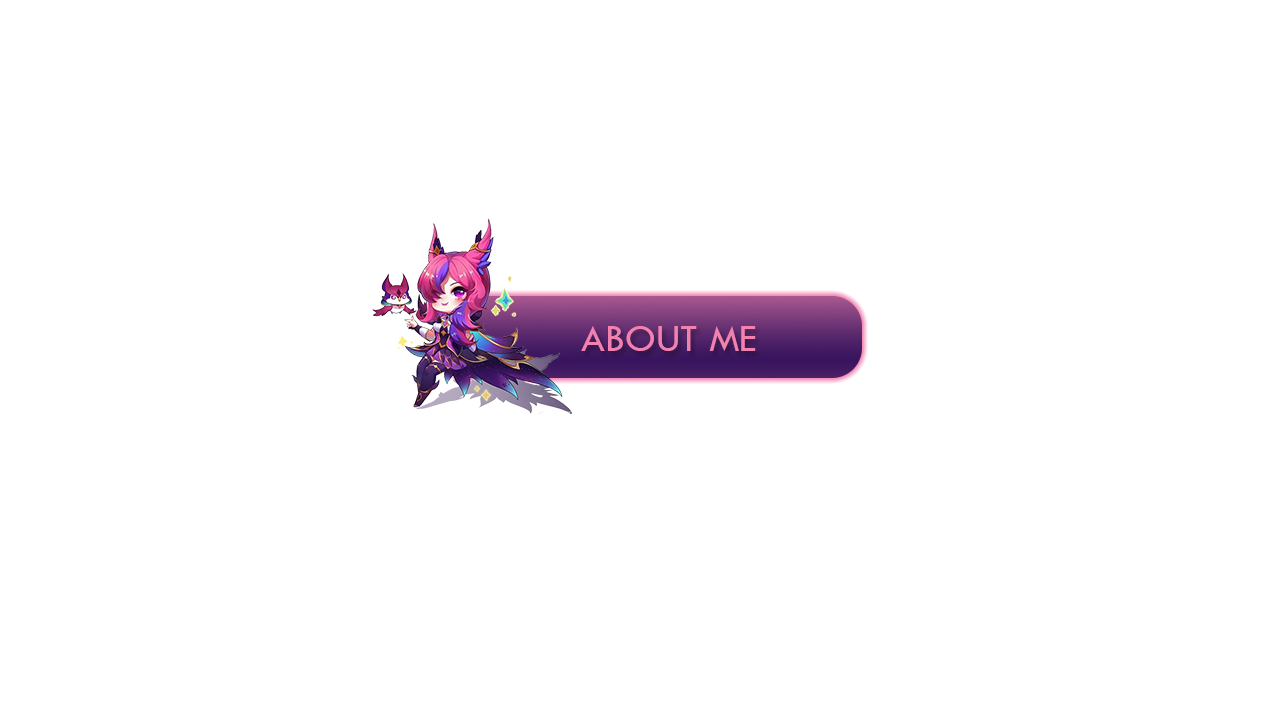
<style>
.page{position:relative;width:1280px;height:720px;background:#ffffff}
.page>*{position:absolute;margin:0}
.t1{font:40px "TwCenMT-Regular";color:#f182af}
</style>
<div class="page">
<p class="t1" style="left:581px;top:326px;width:175px;height:25px">ABOUT ME</p>
</div>
